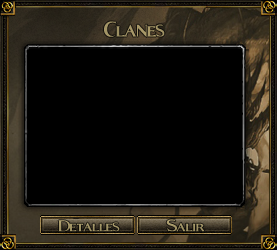
<style>
.page{position:relative;width:277px;height:250px;background:#000000}
.page>*{position:absolute;margin:0}
.t1{font:40.9px "Fleet-Street";color:#a69767;scale:0.94 1}
.t2{font:30px "Fleet-Street";color:#a19365}
.t3{font:30px "Fleet-Street";color:#a29466}
</style>
<div class="page">
<p class="t1" style="left:104px;top:21px;width:61px;height:17px">Clanes</p>
<p class="t2" style="left:58px;top:220px;width:62px;height:12px">Detalles</p>
<p class="t3" style="left:166px;top:219px;width:39px;height:13px">Salir</p>
</div>
